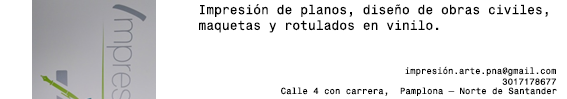
<style>
.page{position:relative;width:567px;height:99px;background:#ffffff}
.page>*{position:absolute;margin:0}
.t1{font:13px "Monospace821BT-Roman";color:#000000}
.t2{font:9px "Monospace821BT-Roman";color:#000000}
</style>
<div class="page">
<p class="t1" style="left:199px;top:4px;width:349px;height:29px">Impresión de planos, diseño de obras civiles, <br>maquetas y rotulados en vinilo.</p>
<p class="t2" style="left:405px;top:66px;width:151px;height:19px;text-align:right">impresión.arte.pna@gmail.com<br>3017178677</p>
<p class="t2" style="left:281px;top:87px;width:276px;height:9px">Calle 4 con carrera,  Pamplona – Norte de Santander</p>
</div>
